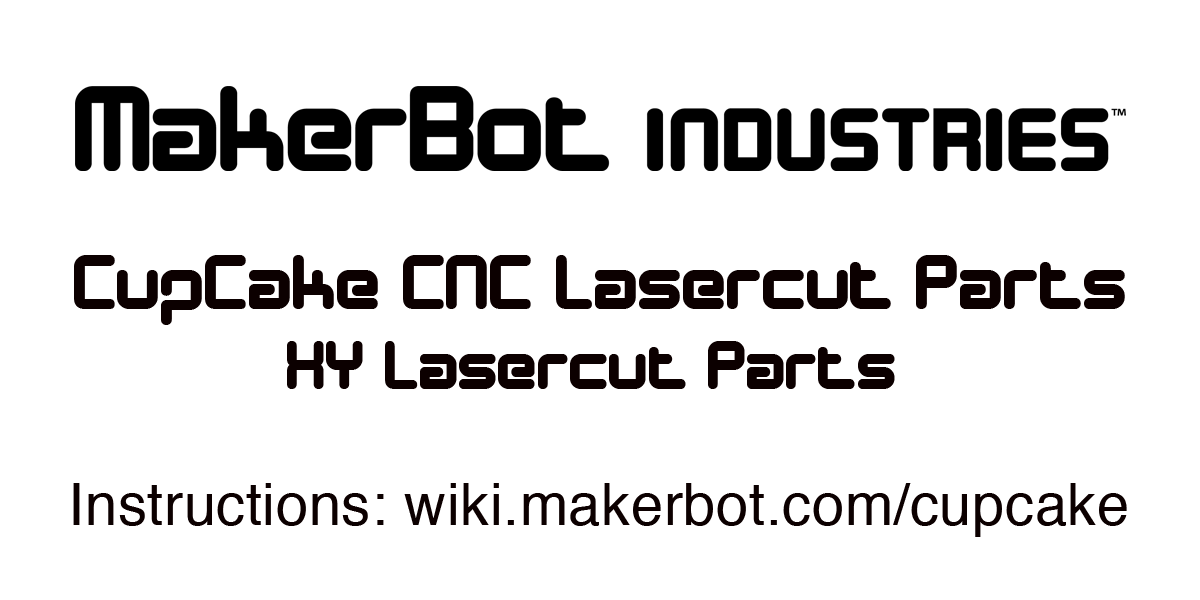
<style>
.page{position:relative;width:1200px;height:600px;background:#ffffff}
.page>*{position:absolute;margin:0}
.t1{font:79.1px "DesignerBlock";letter-spacing:0.01em;color:#0c0000}
.t2{font:70.9px "DesignerBlock";letter-spacing:0.01em;color:#0c0000}
.t3{font:57.9px "Helvetica";letter-spacing:0.01em;color:#0c0000}
</style>
<div class="page">
<p class="t1" style="left:74px;top:255px;width:1051px;height:70px">CupCake CNC Lasercut Parts</p>
<p class="t2" style="left:287px;top:341px;width:608px;height:48px">XY Lasercut Parts</p>
<p class="t3" style="left:73px;top:483px;width:1054px;height:54px">Instructions: wiki.makerbot.com/cupcake</p>
</div>
